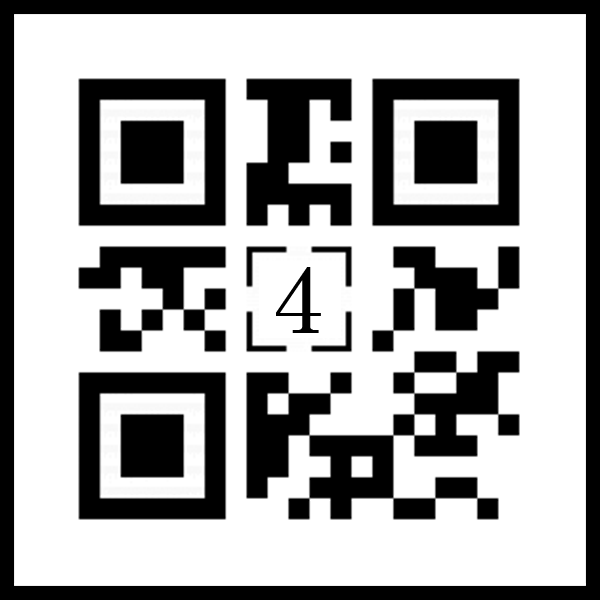
<style>
.page{position:relative;width:600px;height:600px;background:#ffffff}
.page>*{position:absolute;margin:0}
.t1{font:95.2px "Century";color:#000000}
</style>
<div class="page">
<p class="t1" style="left:276px;top:267px;width:45px;height:66px">4</p>
</div>
